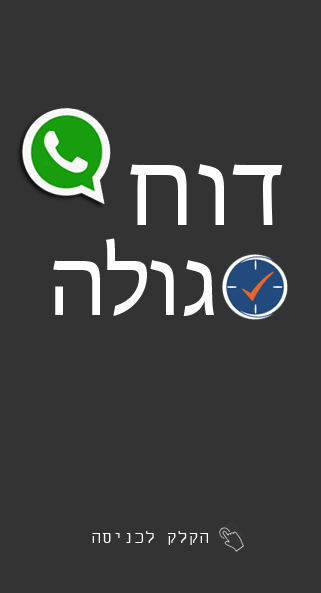
<style>
.page{position:relative;width:321px;height:593px;background:#333333}
.page>*{position:absolute;margin:0}
.t1{font:110px "MyriadHebrew-Regular";color:#ffffff}
.t2{font:100px "MyriadHebrew-Regular";color:#ffffff}
.t3{font:18px "MiriamFixed";color:#ffffff}
</style>
<div class="page">
<p class="t1" style="left:130px;top:164px;width:153px;height:61px">חוד</p>
<p class="t2" style="left:53px;top:238px;width:161px;height:78px">הלוג</p>
<p class="t3" style="left:92px;top:531px;width:116px;height:14px">הסינכל קלקה</p>
</div>
